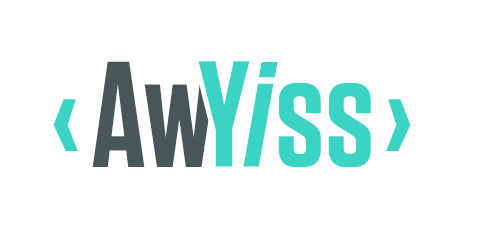
<style>
.page{position:relative;width:477px;height:228px;background:#ffffff}
.page>*{position:absolute;margin:0}
.t1{font:150px "Tungsten-Semibold";color:#475755}
.t2{font:150px "Tungsten-Semibold";color:#3bd4c4}
.t3{font:150px "Tungsten-Semibold";color:#3bd4c4;font-style:italic}
</style>
<div class="page">
<p class="t1" style="left:92px;top:61px;width:122px;height:106px">Aw</p>
<p class="t2" style="left:198px;top:61px;width:173px;height:107px">Y<span class="t3">i</span>ss</p>
</div>
